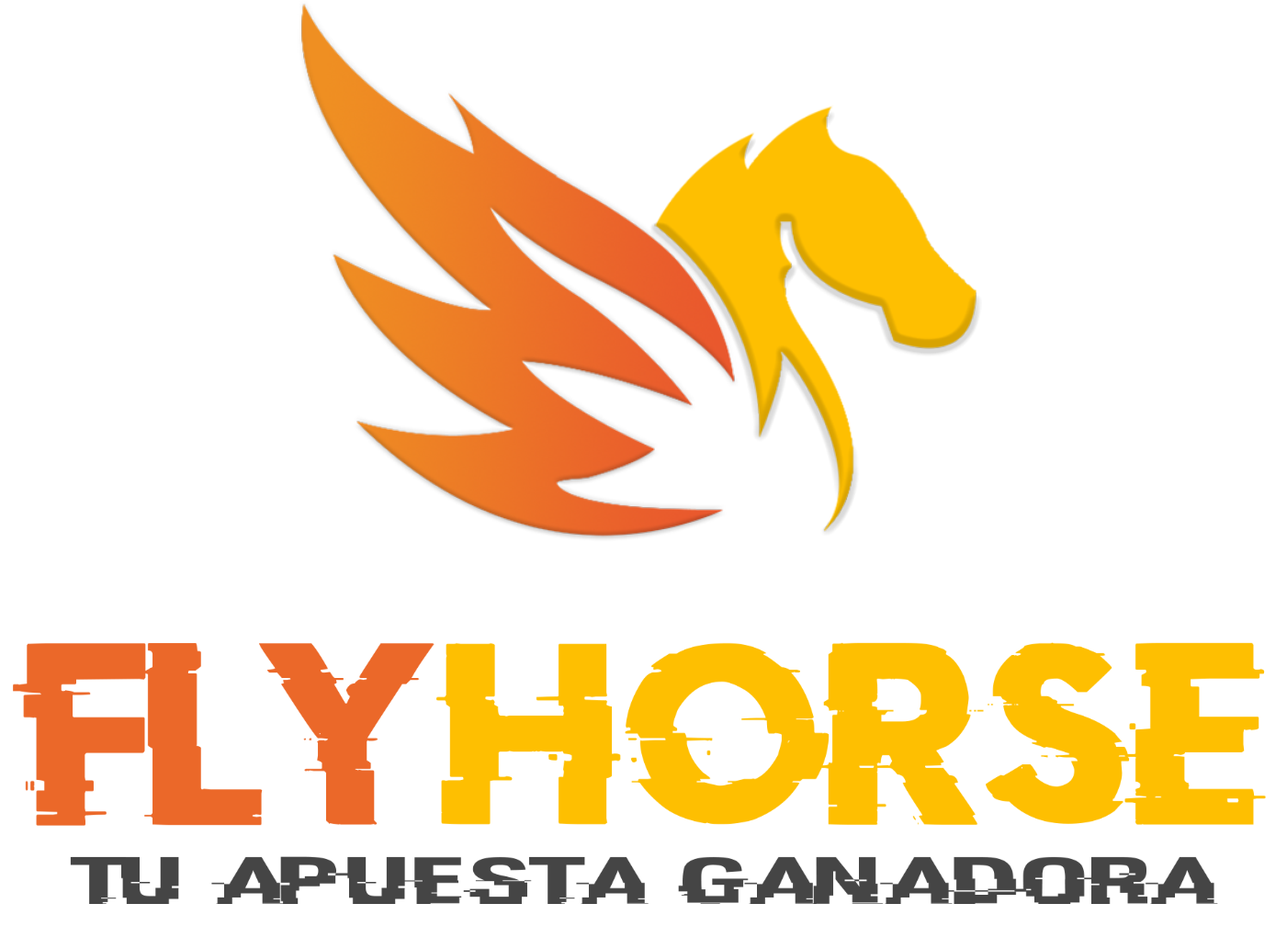
<style>
.page{position:relative;width:1287px;height:926px;background:#ffffff}
.page>*{position:absolute;margin:0}
.t1{font:202.7px "DoctorGlitch";letter-spacing:0.04em;color:#eb6829}
.t2{font:202.7px "DoctorGlitch";letter-spacing:0.04em;color:#febf01}
.t3{font:67.6px "HACKED";color:#454545;scale:2 1}
</style>
<div class="page">
<p class="t1" style="left:13px;top:643px;width:422px;height:183px">Fly</p>
<p class="t2" style="left:436px;top:642px;width:830px;height:183px">horse</p>
<p class="t3" style="left:70px;top:856px;width:1148px;height:48px">Tu apuesta ganadora</p>
</div>
